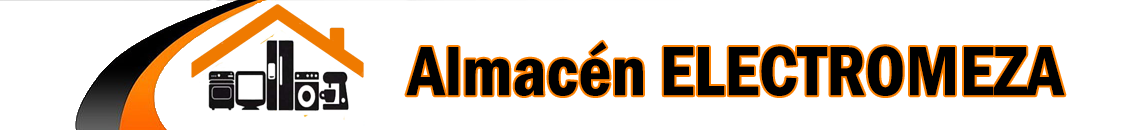
<style>
.page{position:relative;width:1136px;height:130px;background:#ffffff}
.page>*{position:absolute;margin:0}
.t1{font:72px "FranklinGothic-DemiCond";color:#000000}
</style>
<div class="page">
<p class="t1" style="left:406px;top:41px;width:659px;height:55px">Almacén ELECTROMEZA</p>
</div>
